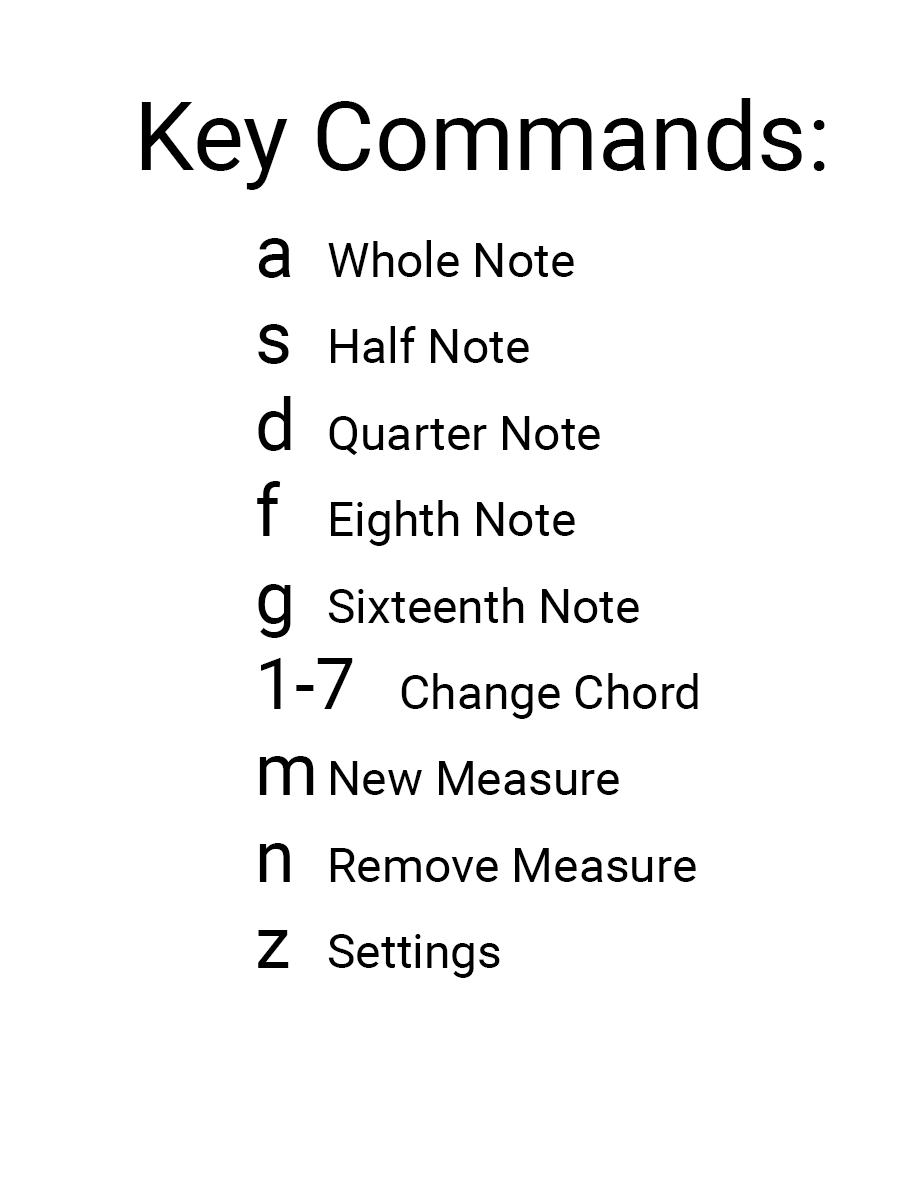
<style>
.page{position:relative;width:900px;height:1200px;background:#ffffff}
.page>*{position:absolute;margin:0}
.t1{font:96px "Roboto-Regular";color:#000000}
.t2{font:48px "Roboto-Regular";color:#000000}
.t3{font:72px "Roboto-Regular";color:#000000}
</style>
<div class="page">
<p class="t1" style="left:141px;top:98px;width:684px;height:92px">Key Commands:</p>
<p class="t2" style="left:257px;top:238px;width:441px;height:740px"><span class="t3">a </span>Whole Note<br><span class="t3">s </span>Half Note<br><span class="t3">d </span>Quarter Note<br><span class="t3">f  </span>Eighth Note<br><span class="t3">g </span>Sixteenth Note<br><span class="t3">1-7  </span>Change Chord<br><span class="t3">m </span>New Measure<br><span class="t3">n </span>Remove Measure<br><span class="t3">z  </span>Settings</p>
</div>
